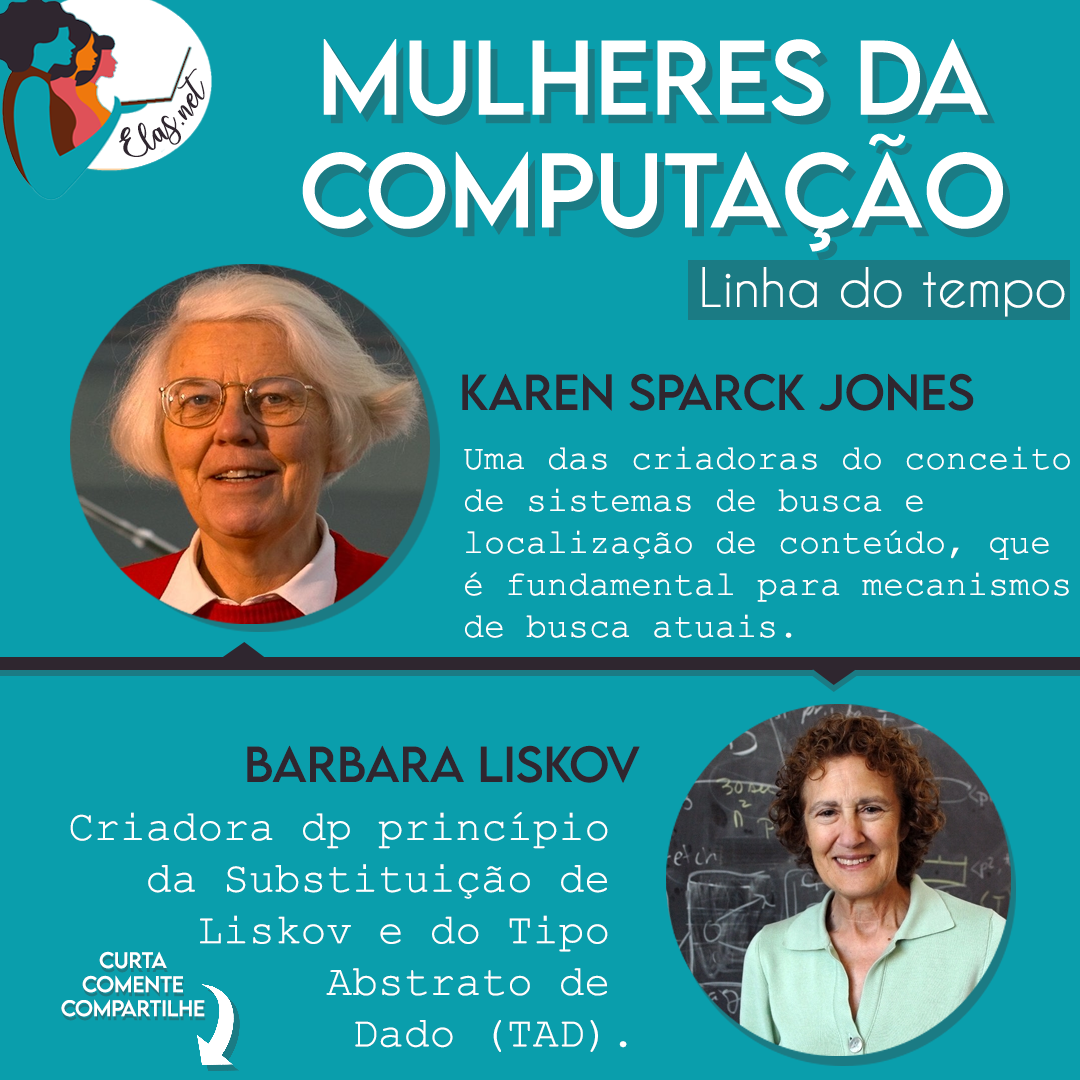
<style>
.page{position:relative;width:1080px;height:1080px;background:#0a9eac}
.page>*{position:absolute;margin:0}
.t1{font:25px "charlinda-Regular";color:#2f262f;scale:1.18 1}
.t2{font:51px "CaviarDreams";color:#ffffff}
.t3{font:45px "LEMONMILK-Regular";color:#2f262f}
.t4{font:35px "CourierNewPSMT";color:#ffffff}
.t5{font:43px "CourierNewPSMT";color:#ffffff}
.t6{font:20px "LEMONMILK-Regular";color:#ffffff}
</style>
<div class="page">
<p class="t1" style="left:119px;top:68px;width:86px;height:89px;rotate:-43deg">Elas.net</p>
<p class="t2" style="left:702px;top:267px;width:363px;height:50px">Linha do tempo</p>
<p class="t3" style="left:462px;top:373px;width:512px;height:38px">Karen Sparck Jones</p>
<p class="t4" style="left:464px;top:446px;width:606px;height:192px">Uma das criadoras do conceito <br>de sistemas de busca e <br>localização de conteúdo, que <br>é fundamental para mecanismos <br>de busca atuais.</p>
<p class="t3" style="left:247px;top:745px;width:393px;height:38px">Barbara Liskov</p>
<p class="t5" style="left:70px;top:812px;width:557px;height:240px;text-align:right">Criadora dp princípio <br>da Substituição de <br>Liskov e do Tipo <br>Abstrato de <br>Dado (TAD).</p>
<p class="t6" style="left:61px;top:951px;width:144px;height:66px;text-align:center">Curta<br>Comente<br>Compartilhe</p>
</div>
